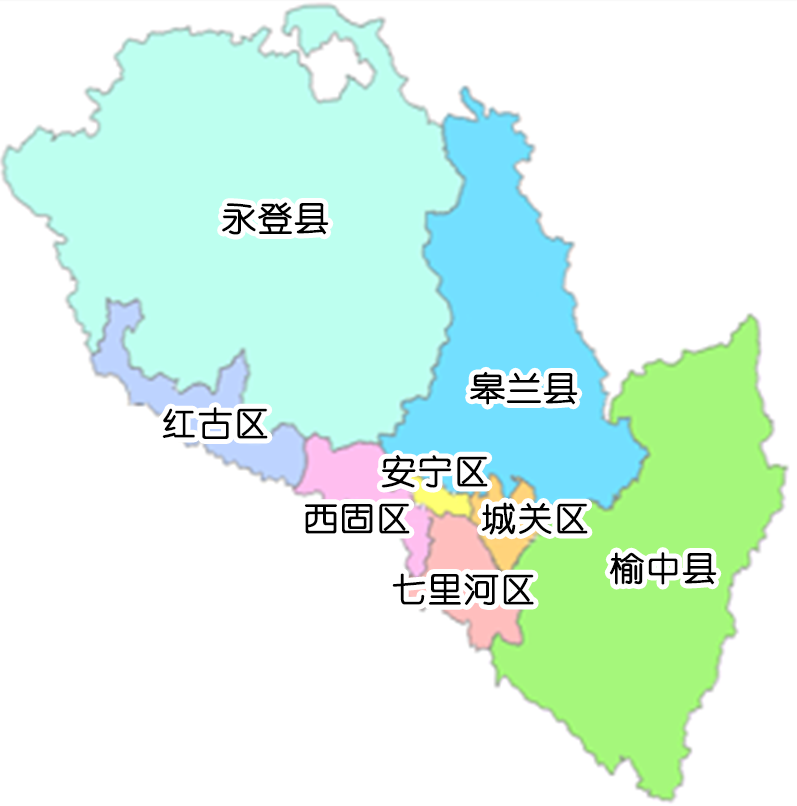
<style>
.page{position:relative;width:797px;height:806px;background:#ffffff}
.page>*{position:absolute;margin:0}
.t1{font:33.4px "YouYuan";color:#000000;font-weight:bold;scale:1.06 1}
</style>
<div class="page">
<p class="t1" style="left:222px;top:202px;width:107px;height:33px">永登县</p>
<p class="t1" style="left:470px;top:371px;width:108px;height:34px">皋兰县</p>
<p class="t1" style="left:162px;top:407px;width:106px;height:32px">红古区</p>
<p class="t1" style="left:381px;top:455px;width:107px;height:33px">安宁区</p>
<p class="t1" style="left:304px;top:503px;width:106px;height:31px">西固区</p>
<p class="t1" style="left:481px;top:502px;width:107px;height:33px">城关区</p>
<p class="t1" style="left:609px;top:552px;width:108px;height:33px">榆中县</p>
<p class="t1" style="left:392px;top:573px;width:142px;height:32px">七里河区</p>
</div>
